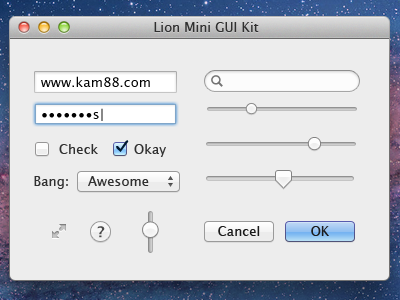
<style>
.page{position:relative;width:400px;height:300px;background:#ededed}
.page>*{position:absolute;margin:0}
.t1{font:13px "LucidaGrande";color:#303030}
.t2{font:13px "LucidaGrande";letter-spacing:0.01em;color:#000000}
.t3{font:13px "LucidaGrande";letter-spacing:0.01em;color:#303030}
.t4{font:15px "LucidaGrande-Bold";letter-spacing:0.01em;color:#4a4a4a}
.t5{font:13px "LucidaGrande";letter-spacing:0.01em;color:#1b1b1b}
</style>
<div class="page">
<p class="t1" style="left:154px;top:22px;width:105px;height:10px">Lion Mini GUI Kit</p>
<p class="t2" style="left:41px;top:76px;width:109px;height:11px">www.kam88.com</p>
<p class="t2" style="left:42px;top:108px;width:61px;height:13px">•••••••s|</p>
<p class="t3" style="left:59px;top:144px;width:39px;height:10px">Check</p>
<p class="t3" style="left:134px;top:144px;width:32px;height:13px">Okay</p>
<p class="t3" style="left:34px;top:176px;width:34px;height:13px">Bang:</p>
<p class="t3" style="left:88px;top:176px;width:61px;height:10px">Awesome</p>
<p class="t4" style="left:97px;top:226px;width:8px;height:12px">?</p>
<p class="t5" style="left:218px;top:226px;width:42px;height:10px">Cancel</p>
<p class="t5" style="left:311px;top:226px;width:18px;height:10px">OK</p>
</div>
